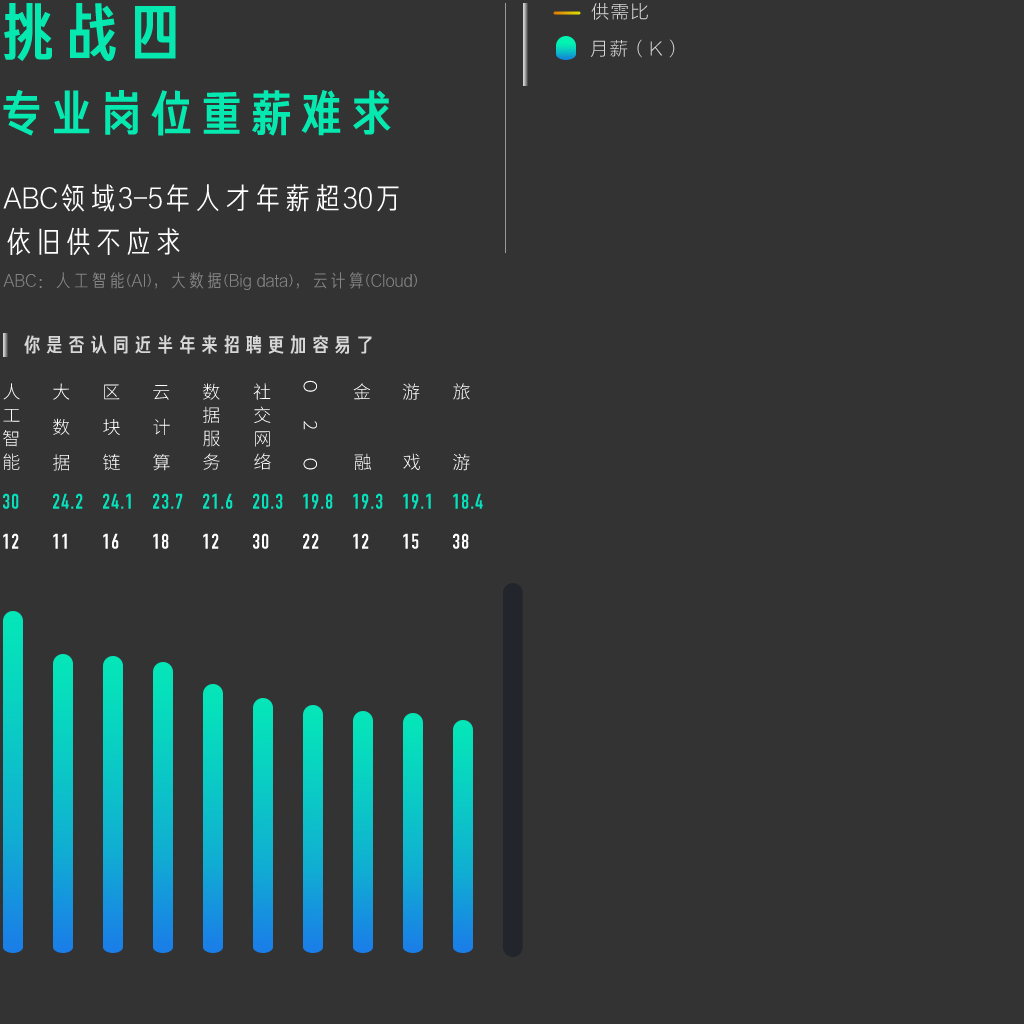
<style>
.page{position:relative;width:1024px;height:1024px;background:#333333}
.page>*{position:absolute;margin:0}
.t1{font:63.4px "FZCJHJW--GB1-0";color:#05e9b1}
.t2{font:18px "FZLTXHJW--GB1-0";letter-spacing:0.1em;color:#d7d7d7}
.t3{font:50px "FZCJHJW--GB1-0";color:#05e9b1}
.t4{font:30px/43.5px "FZJHJW--GB1-0";color:#ffffff}
.t5{font:18px "FZJHJW--GB1-0";color:#858585}
.t6{font:20.2px "FZCJHJW--GB1-0";letter-spacing:0.1em;color:#d7d7d7}
.t7{font:18px/23.4px "SourceHanSansCN-Light";letter-spacing:0.07em;color:#ffffff}
.t8{font:18px/35.4px "SourceHanSansCN-Light";letter-spacing:0.07em;color:#ffffff}
.t9{font:18px "SourceHanSansCN-Light";letter-spacing:1.53em;color:#ffffff}
.t10{font:18px/70.4px "SourceHanSansCN-Light";letter-spacing:0.07em}
.t11{font:18px/70.4px "SourceHanSansCN-Light";letter-spacing:0.07em;color:#ffffff}
.t12{font:21px "DINCondensed-Bold";letter-spacing:0.06em;color:#06e1bb}
.t13{font:21px "DINCondensed-Bold";letter-spacing:0.06em;color:#ffffff}
</style>
<div class="page">
<p class="t1" style="left:4px;top:3px;width:172px;height:58px">挑战四</p>
<p class="t2" style="left:591px;top:3px;width:57px;height:17px">供需比</p>
<p class="t2" style="left:590px;top:39px;width:85px;height:19px">月薪（K）</p>
<p class="t3" style="left:3px;top:89px;width:388px;height:47px">专业岗位重薪难求</p>
<p class="t4" style="left:3px;top:184px;width:396px;height:71px">ABC领域3-5年人才年薪超30万<br>依旧供不应求</p>
<p class="t5" style="left:3px;top:272px;width:414px;height:18px">ABC：人工智能(AI)，大数据(Big data)，云计算(Cloud)</p>
<p class="t6" style="left:24px;top:335px;width:348px;height:19px">你是否认同近半年来招聘更加容易了</p>
<p class="t7" style="left:3px;top:383px;width:17px;height:87px">人<br>工<br>智<br>能</p>
<p class="t8" style="left:53px;top:383px;width:17px;height:88px">大<br>数<br>据</p>
<p class="t8" style="left:103px;top:384px;width:17px;height:86px">区<br>块<br>链</p>
<p class="t8" style="left:153px;top:385px;width:17px;height:86px">云<br>计<br>算</p>
<p class="t7" style="left:203px;top:383px;width:17px;height:87px">数<br>据<br>服<br>务</p>
<p class="t7" style="left:253px;top:383px;width:18px;height:87px">社<br>交<br>网<br>络</p>
<p class="t9" style="left:303px;top:380px;width:14px;height:90px;rotate:90deg">O2O</p>
<p class="t10" style="left:353px;top:383px;width:18px;height:87px;rotate:-1deg">金<br>融</p>
<p class="t11" style="left:402px;top:383px;width:18px;height:87px;rotate:-1deg">游<br>戏</p>
<p class="t10" style="left:453px;top:383px;width:17px;height:88px">旅<br>游</p>
<p class="t12" style="left:3px;top:493px;width:16px;height:16px">30</p>
<p class="t12" style="left:53px;top:493px;width:30px;height:16px">24.2</p>
<p class="t12" style="left:103px;top:493px;width:28px;height:16px">24.1</p>
<p class="t12" style="left:153px;top:493px;width:30px;height:16px">23.7</p>
<p class="t12" style="left:203px;top:493px;width:30px;height:16px">21.6</p>
<p class="t12" style="left:253px;top:493px;width:30px;height:16px">20.3</p>
<p class="t12" style="left:303px;top:493px;width:30px;height:16px">19.8</p>
<p class="t12" style="left:353px;top:493px;width:30px;height:16px">19.3</p>
<p class="t12" style="left:403px;top:493px;width:28px;height:16px">19.1</p>
<p class="t12" style="left:453px;top:493px;width:30px;height:16px">18.4</p>
<p class="t13" style="left:3px;top:533px;width:16px;height:16px">12</p>
<p class="t13" style="left:53px;top:533px;width:14px;height:16px">11</p>
<p class="t13" style="left:103px;top:533px;width:16px;height:16px">16</p>
<p class="t13" style="left:153px;top:533px;width:16px;height:16px">18</p>
<p class="t13" style="left:203px;top:533px;width:16px;height:16px">12</p>
<p class="t13" style="left:253px;top:533px;width:16px;height:16px">30</p>
<p class="t13" style="left:303px;top:533px;width:16px;height:16px">22</p>
<p class="t13" style="left:353px;top:533px;width:16px;height:16px">12</p>
<p class="t13" style="left:403px;top:533px;width:16px;height:16px">15</p>
<p class="t13" style="left:453px;top:533px;width:16px;height:16px">38</p>
</div>
